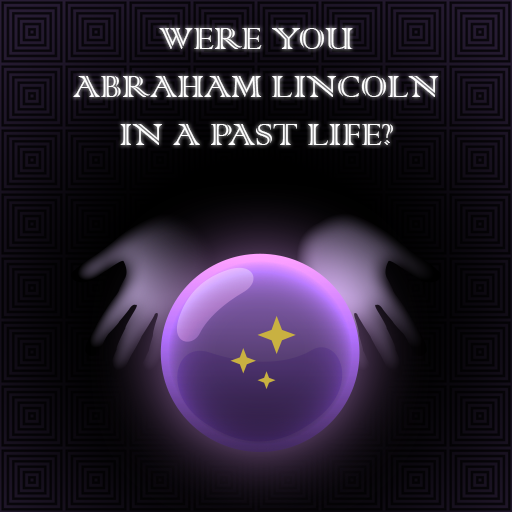
<style>
.page{position:relative;width:512px;height:512px}
.page>*{position:absolute;margin:0}
.t1{font:40px "ColonnaMT";color:#ffffff}
</style>
<div class="page">
<p class="t1" style="left:73px;top:28px;width:365px;height:117px;text-align:center">WERE YOU <br>ABRAHAM LINCOLN <br>IN A PAST LIFE?</p>
</div>
